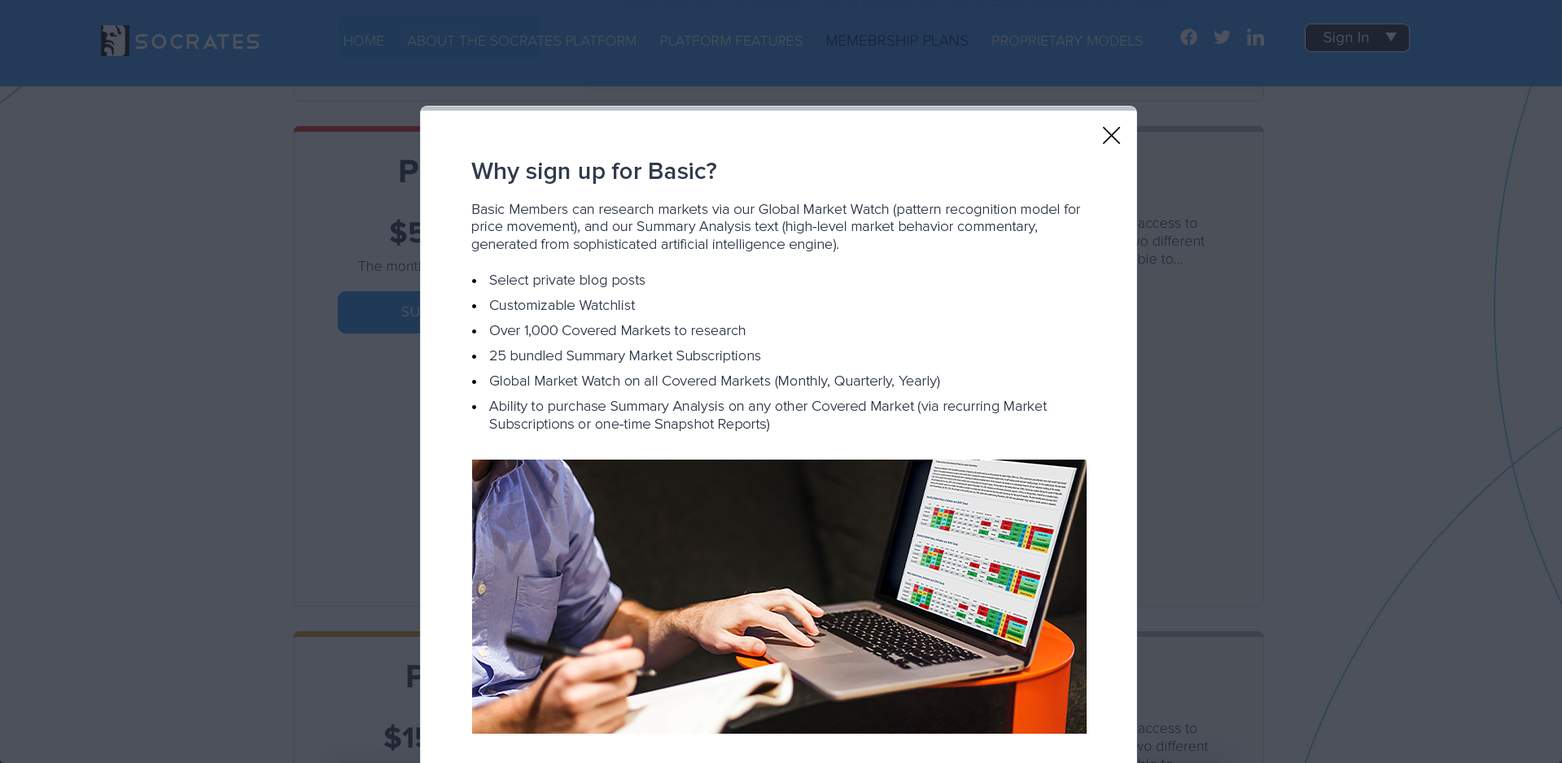
<style>
.page{position:relative;width:1562px;height:763px;background:#4c515b}
.page>*{position:absolute;margin:0}
.t1{font:24.4px "ProximaNova-Semibold";color:#303b4d}
.t2{font:14.7px "ProximaNova-Light";color:#303b4d}
</style>
<div class="page">
<p class="t1" style="left:471px;top:163px;width:245px;height:21px">Why sign up for Basic?</p>
<p class="t2" style="left:471px;top:203px;width:609px;height:49px">Basic Members can research markets via our Global Market Watch (pattern recognition model for price movement), and our Summary Analysis text (high-level market behavior commentary, generated from sophisticated artificial intelligence engine).</p>
<p class="t2" style="left:489px;top:275px;width:559px;height:157px">Select private blog posts<br>Customizable Watchlist<br>Over 1,000 Covered Markets to research<br>25 bundled Summary Market Subscriptions<br>Global Market Watch on all Covered Markets (Monthly, Quarterly, Yearly)<br>Ability to purchase Summary Analysis on any other Covered Market (via recurring Market Subscriptions or one-time Snapshot Reports)</p>
</div>
